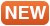
<style>
.page{position:relative;width:50px;height:26px;background:#ffffff}
.page>*{position:absolute;margin:0}
.t1{font:18px "Helvetica-Bold";color:#ffffff}
</style>
<div class="page">
<p class="t1" style="left:5px;top:6px;width:42px;height:13px">NEW</p>
</div>
